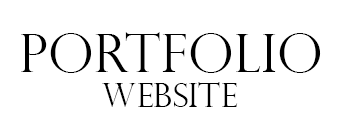
<style>
.page{position:relative;width:340px;height:124px;background:#ffffff}
.page>*{position:absolute;margin:0}
.t1{font:53.3px "PerpetuaTitlingMT-Light";color:#000000}
.t2{font:33.3px "PerpetuaTitlingMT-Light";color:#000000}
</style>
<div class="page">
<p class="t1" style="left:21px;top:32px;width:300px;height:41px">portfolio</p>
<p class="t2" style="left:102px;top:82px;width:136px;height:25px">Website</p>
</div>
